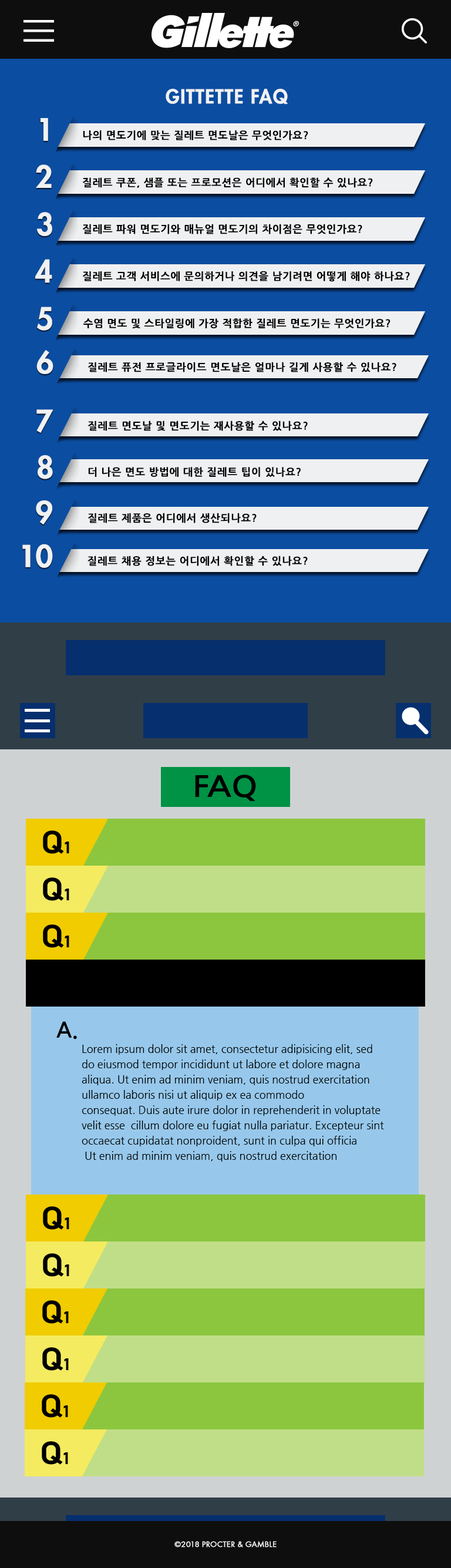
<style>
.page{position:relative;width:451px;height:1568px;background:#0b4da1}
.page>*{position:absolute;margin:0}
.t1{font:18.8px "Futura-Heavy";letter-spacing:0.025em;color:#f0f1f2;font-weight:bold}
.t2{font:29.8px "Futura-Heavy";letter-spacing:0.025em;color:#f0f1f2;font-weight:bold}
.t3{font:10.2px "NanumGothicBold";letter-spacing:0.025em;color:#000000;font-weight:bold}
.t4{font:29.5px "Futura-Heavy";letter-spacing:0.025em;color:#f0f1f2;font-weight:bold}
.t5{font:29.3px "Futura-Heavy";letter-spacing:-0.03em;color:#f0f1f2;font-weight:bold}
.t6{font:10.1px "NanumGothicBold";letter-spacing:0.025em;color:#000000;font-weight:bold}
.t7{font:10.6px/15.3px "NanumGothic";color:#000000}
.t8{font:8.2px "FuturaTEE-Book";color:#f0f1f2;font-weight:bold}
</style>
<div class="page">
<p class="t1" style="left:166px;top:89px;width:122px;height:16px">GITTETTE FAQ</p>
<p class="t2" style="left:41px;top:118px;width:7px;height:23px">1</p>
<p class="t3" style="left:83px;top:130px;width:225px;height:10px">나의 면도기에 맞는 질레트 면도날은 무엇인가요?</p>
<p class="t2" style="left:36px;top:164px;width:16px;height:24px">2</p>
<p class="t3" style="left:83px;top:177px;width:290px;height:11px">질레트 쿠폰, 샘플 또는 프로모션은 어디에서 확인할 수 있나요?</p>
<p class="t2" style="left:37px;top:212px;width:15px;height:24px">3</p>
<p class="t3" style="left:83px;top:224px;width:279px;height:10px">질레트 파워 면도기와 매뉴얼 면도기의 차이점은 무엇인가요?</p>
<p class="t2" style="left:35px;top:259px;width:17px;height:24px">4</p>
<p class="t3" style="left:83px;top:271px;width:327px;height:11px">질레트 고객 서비스에 문의하거나 의견을 남기려면 어떻게 해야 하나요?</p>
<p class="t2" style="left:37px;top:307px;width:15px;height:24px">5</p>
<p class="t3" style="left:83px;top:318px;width:308px;height:11px">수염 면도 및 스타일링에 가장 적합한 질레트 면도기는 무엇인가요?</p>
<p class="t4" style="left:36px;top:350px;width:17px;height:24px">6</p>
<p class="t3" style="left:88px;top:362px;width:308px;height:10px">질레트 퓨전 프로글라이드 면도날은 얼마나 길게 사용할 수 있나요?</p>
<p class="t4" style="left:36px;top:409px;width:17px;height:24px">7</p>
<p class="t3" style="left:88px;top:420px;width:220px;height:11px">질레트 면도날 및 면도기는 재사용할 수 있나요?</p>
<p class="t4" style="left:38px;top:455px;width:15px;height:24px">8</p>
<p class="t3" style="left:88px;top:467px;width:213px;height:10px">더 나은 면도 방법에 대한 질레트 팁이 있나요?</p>
<p class="t4" style="left:36px;top:500px;width:16px;height:24px">9</p>
<p class="t3" style="left:88px;top:513px;width:169px;height:10px">질레트 제품은 어디에서 생산되나요?</p>
<p class="t5" style="left:22px;top:544px;width:31px;height:24px">10</p>
<p class="t6" style="left:88px;top:556px;width:220px;height:10px">질레트 채용 정보는 어디에서 확인할 수 있나요?</p>
<p class="t7" style="left:82px;top:1044px;width:302px;height:118px">Lorem ipsum dolor sit amet, consectetur adipisicing elit, sed do eiusmod tempor incididunt ut labore et dolore magna aliqua. Ut enim ad minim veniam, quis nostrud exercitation ullamco laboris nisi ut aliquip ex ea commodo <br>consequat. Duis aute irure dolor in reprehenderit in voluptate velit esse  cillum dolore eu fugiat nulla pariatur. Excepteur sint occaecat cupidatat nonproident, sunt in culpa qui officia<br> Ut enim ad minim veniam, quis nostrud exercitation</p>
<p class="t8" style="left:174px;top:1541px;width:103px;height:6px">©2018 PROCTER &amp; GAMBLE</p>
</div>
